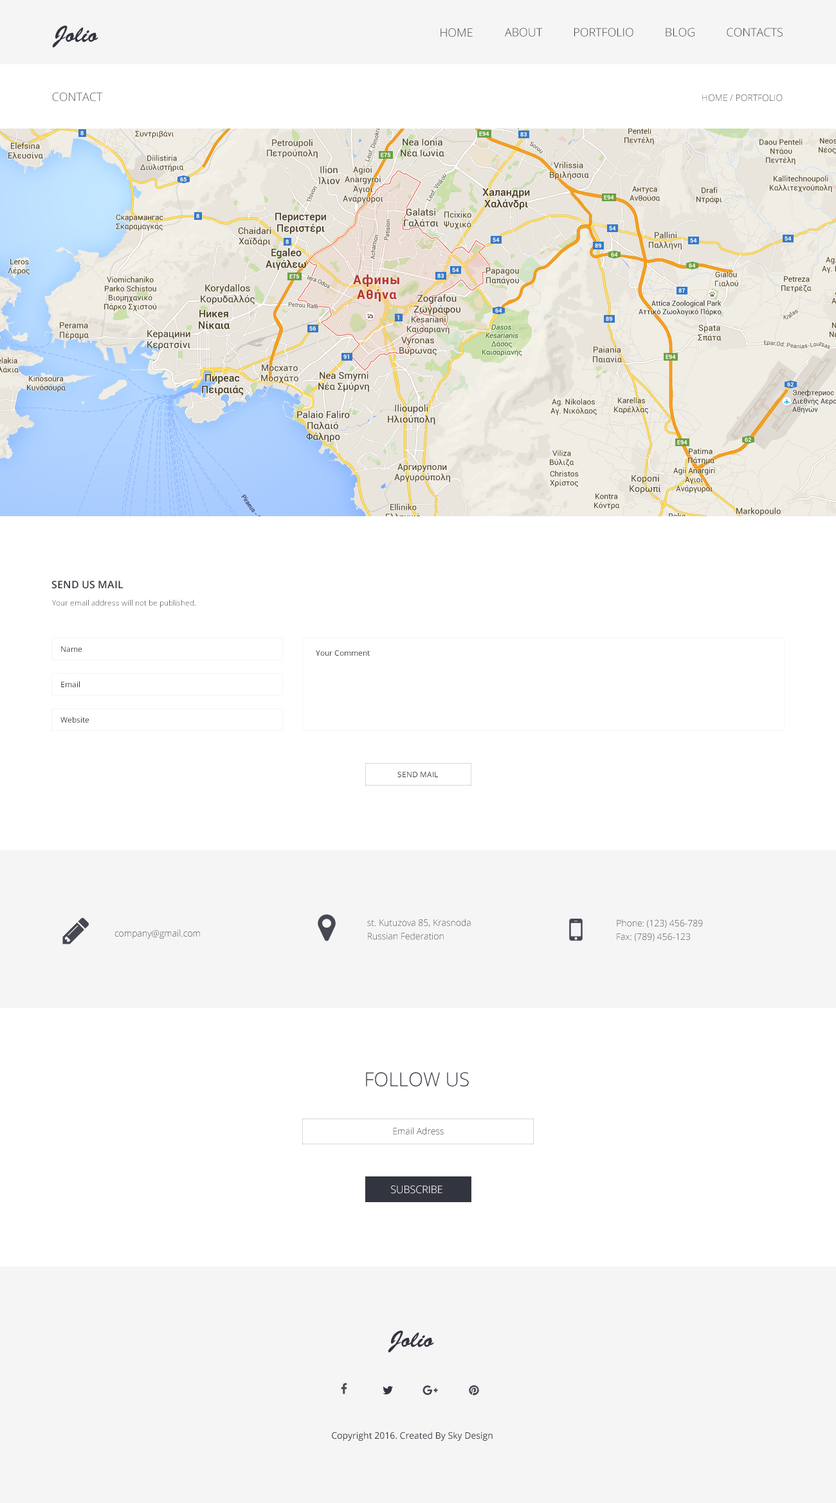
<style>
.page{position:relative;width:836px;height:1503px;background:#ffffff}
.page>*{position:absolute;margin:0}
.t1{font:23.1px "BrushScriptStd";color:#32343f}
.t2{font:11.6px "OpenSans-Light"}
.t3{font:11.6px "OpenSans-Light";color:#32343f}
.t4{font:11.6px "OpenSans-Light";color:#464852}
.t5{font:9px "OpenSans-Light";color:#464852}
.t6{font:10.3px "OpenSans-Semibold";color:#32343f}
.t7{font:7.7px "OpenSans-Light"}
.t8{font:7.7px "OpenSans";color:#32343f}
.t9{font:9px/13.5px "OpenSans-Light"}
.t10{font:19.3px "OpenSans-Light";color:#32343f}
.t11{font:9px "OpenSans-Light";color:#32343f}
.t12{font:10.3px "OpenSans-Light";color:#ffffff}
.t13{font:9px "OpenSans";color:#32343f}
</style>
<div class="page">
<p class="t1" style="left:52px;top:25px;width:46px;height:23px">Jolio</p>
<p class="t2" style="left:440px;top:28px;width:33px;height:9px">HOME</p>
<p class="t3" style="left:505px;top:28px;width:38px;height:9px">ABOUT</p>
<p class="t3" style="left:574px;top:28px;width:59px;height:9px">PORTFOLIO</p>
<p class="t3" style="left:665px;top:28px;width:29px;height:9px">BLOG</p>
<p class="t3" style="left:726px;top:28px;width:56px;height:9px">CONTACTS</p>
<p class="t4" style="left:52px;top:93px;width:51px;height:9px">CONTACT</p>
<p class="t5" style="left:702px;top:94px;width:80px;height:8px">HOME / PORTFOLIO</p>
<p class="t6" style="left:51px;top:580px;width:72px;height:9px">SEND US MAIL</p>
<p class="t7" style="left:52px;top:600px;width:143px;height:8px">Your email address will not be published.</p>
<p class="t8" style="left:61px;top:646px;width:21px;height:6px">Name</p>
<p class="t8" style="left:316px;top:650px;width:54px;height:6px">Your Comment</p>
<p class="t8" style="left:61px;top:681px;width:19px;height:6px">Email</p>
<p class="t8" style="left:60px;top:717px;width:29px;height:6px">Website</p>
<p class="t8" style="left:397px;top:771px;width:41px;height:6px">SEND MAIL</p>
<p class="t5" style="left:114px;top:930px;width:86px;height:9px">company@gmail.com</p>
<p class="t9" style="left:367px;top:919px;width:104px;height:21px">st. Kutuzova 85, Krasnoda<br>Russian Federation</p>
<p class="t9" style="left:616px;top:919px;width:87px;height:23px">Phone: (123) 456-789<br>Fax: (789) 456-123</p>
<p class="t10" style="left:366px;top:1072px;width:103px;height:14px">FOLLOW US</p>
<p class="t11" style="left:393px;top:1127px;width:51px;height:8px">Email Adress</p>
<p class="t12" style="left:391px;top:1185px;width:51px;height:9px">SUBSCRIBE</p>
<p class="t1" style="left:388px;top:1330px;width:46px;height:23px">Jolio</p>
<p class="t13" style="left:332px;top:1432px;width:160px;height:9px">Copyright 2016. Created By Sky Design</p>
</div>
